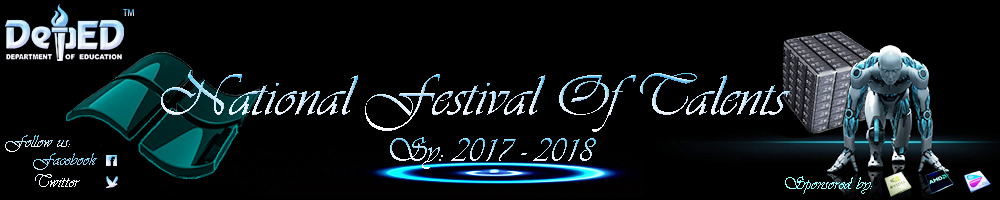
<style>
.page{position:relative;width:1000px;height:200px;background:#000000}
.page>*{position:absolute;margin:0}
.t1{font:60px "Vivaldii"}
.t2{font:18px "Vivaldii"}
.t3{font:33.8px "Vivaldii"}
.t4{font:18px "Vivaldii";color:#96ffff}
</style>
<div class="page">
<p class="t1" style="left:161px;top:70px;width:629px;height:62px">National Festival Of Talents</p>
<p class="t2" style="left:5px;top:135px;width:65px;height:17px">Follow us:</p>
<p class="t3" style="left:390px;top:137px;width:206px;height:32px">Sy: 2017 - 2018</p>
<p class="t2" style="left:33px;top:153px;width:64px;height:34px">Facebook<br>Twitter</p>
<p class="t4" style="left:785px;top:176px;width:87px;height:18px">Sponsored by:</p>
</div>
